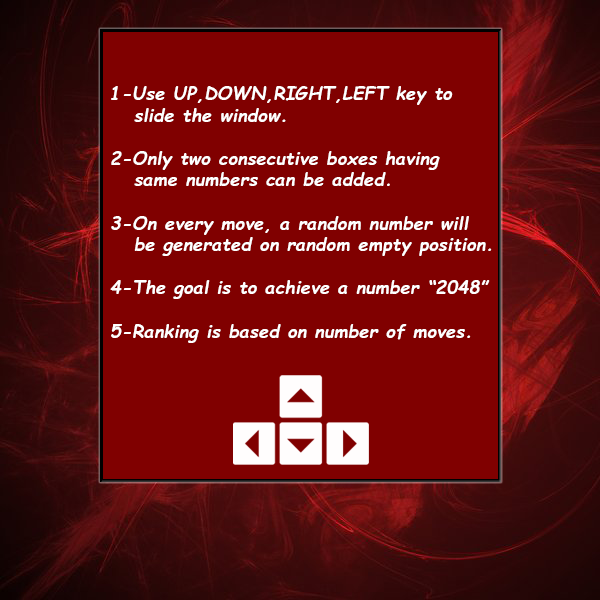
<style>
.page{position:relative;width:600px;height:600px;background:#800000}
.page>*{position:absolute;margin:0}
.t1{font:18px "ComicSansMS-BoldItalic";letter-spacing:0.01em;color:#ffffff}
</style>
<div class="page">
<p class="t1" style="left:110px;top:86px;width:382px;height:257px">1-Use UP,DOWN,RIGHT,LEFT key to<br>   slide the window.<br><br>2-Only two consecutive boxes having <br>   same numbers can be added.<br><br>3-On every move, a random number will<br>   be generated on random empty position.<br><br>4-The goal is to achieve a number “2048”<br><br>5-Ranking is based on number of moves.</p>
</div>
